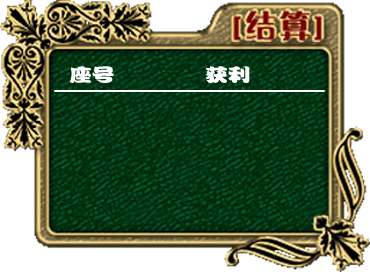
<style>
.page{position:relative;width:370px;height:272px}
.page>*{position:absolute;margin:0}
.t1{font:18px "FZPWJW--GB1-0";color:#ffffff;scale:1.26 1}
</style>
<div class="page">
<p class="t1" style="left:69px;top:66px;width:45px;height:17px">座号</p>
<p class="t1" style="left:205px;top:66px;width:45px;height:17px">获利</p>
</div>
